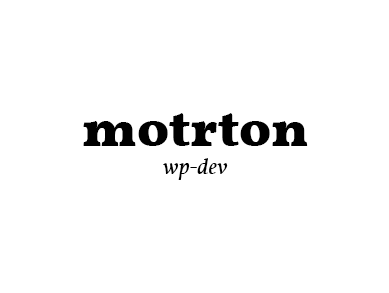
<style>
.page{position:relative;width:389px;height:293px;background:#ffffff}
.page>*{position:absolute;margin:0}
.t1{font:53px "Vollkorn-Bold";color:#000000}
.t2{font:23px "Vollkorn-Italic";color:#000000}
</style>
<div class="page">
<p class="t1" style="left:83px;top:113px;width:225px;height:67px;text-align:center">motrton<br><span class="t2">wp-dev</span></p>
</div>
